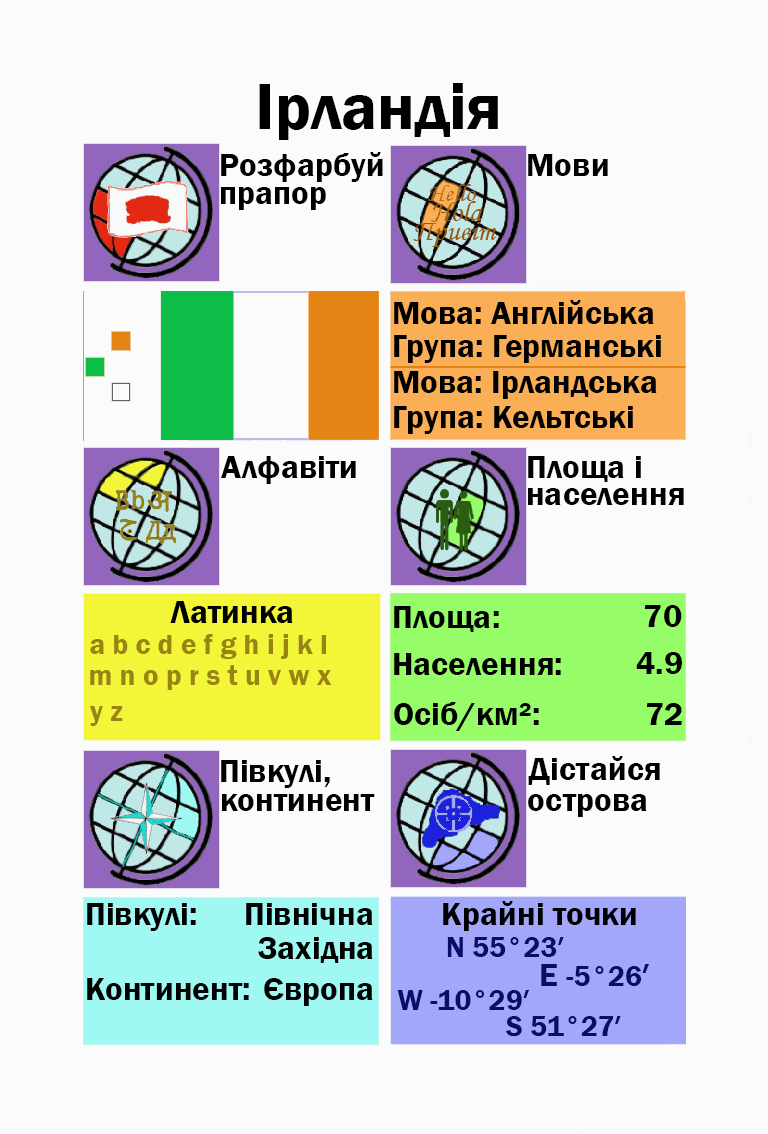
<style>
.page{position:relative;width:768px;height:1134px;background:#fbfbfb}
.page>*{position:absolute;margin:0}
.t1{font:66.7px "FranklinGothic-Demi";color:#000000}
.t2{font:33.3px "FranklinGothic-Demi";color:#000000}
.t3{font:33.3px "FranklinGothic-Demi";color:#000003}
.t4{font:29.2px "FranklinGothic-Demi";color:#988413}
.t5{font:29.2px "FranklinGothic-Demi";color:#090c69}
.t6{font:33.3px "FranklinGothic-Demi";color:#090c69}
</style>
<div class="page">
<p class="t1" style="left:259px;top:83px;width:239px;height:57px">Ірландія</p>
<p class="t2" style="left:221px;top:152px;width:162px;height:30px">Розфарбуй</p>
<p class="t2" style="left:528px;top:154px;width:80px;height:22px">Мови</p>
<p class="t2" style="left:221px;top:187px;width:105px;height:23px">прапор</p>
<p class="t2" style="left:394px;top:300px;width:260px;height:24px">Мова: Англійська</p>
<p class="t2" style="left:394px;top:335px;width:267px;height:28px">Група: Германські</p>
<p class="t2" style="left:394px;top:371px;width:263px;height:28px">Мова: Ірландська</p>
<p class="t2" style="left:394px;top:406px;width:239px;height:28px">Група: Кельтські</p>
<p class="t2" style="left:221px;top:456px;width:135px;height:28px">Алфавіти</p>
<p class="t2" style="left:528px;top:456px;width:113px;height:26px">Площа і</p>
<p class="t2" style="left:528px;top:488px;width:156px;height:17px">населення</p>
<p class="t2" style="left:170px;top:601px;width:123px;height:22px">Латинка</p>
<p class="t2" style="left:394px;top:606px;width:105px;height:26px">Площа:</p>
<p class="t3" style="left:644px;top:605px;width:38px;height:22px">70</p>
<p class="t4" style="left:90px;top:634px;width:236px;height:25px">a b c d e f g h i j k l</p>
<p class="t2" style="left:394px;top:653px;width:167px;height:22px">Населення:</p>
<p class="t2" style="left:636px;top:652px;width:46px;height:22px">4.9</p>
<p class="t4" style="left:90px;top:665px;width:242px;height:25px">m n o p r s t u v w x</p>
<p class="t2" style="left:394px;top:702px;width:145px;height:29px">Осіб/км²:</p>
<p class="t4" style="left:89px;top:706px;width:34px;height:20px">y z</p>
<p class="t2" style="left:646px;top:703px;width:36px;height:22px">72</p>
<p class="t2" style="left:221px;top:760px;width:109px;height:28px">Півкулі,</p>
<p class="t2" style="left:528px;top:756px;width:132px;height:29px">Дістайся</p>
<p class="t2" style="left:222px;top:794px;width:153px;height:17px">континент</p>
<p class="t2" style="left:528px;top:794px;width:119px;height:23px">острова</p>
<p class="t2" style="left:87px;top:903px;width:109px;height:28px">Півкулі:</p>
<p class="t2" style="left:246px;top:903px;width:127px;height:22px">Північна</p>
<p class="t3" style="left:443px;top:901px;width:193px;height:30px">Крайні точки</p>
<p class="t2" style="left:258px;top:937px;width:115px;height:26px">Західна</p>
<p class="t5" style="left:447px;top:937px;width:117px;height:20px">N 55°23′</p>
<p class="t5" style="left:541px;top:964px;width:108px;height:22px"><span class="t6">E </span>-5°26<span class="t6">′</span></p>
<p class="t2" style="left:87px;top:978px;width:162px;height:22px">Континент:</p>
<p class="t2" style="left:264px;top:978px;width:109px;height:28px">Європа</p>
<p class="t5" style="left:397px;top:990px;width:133px;height:20px">W -10°29′</p>
<p class="t5" style="left:506px;top:1016px;width:115px;height:21px">S 51°27′</p>
</div>
